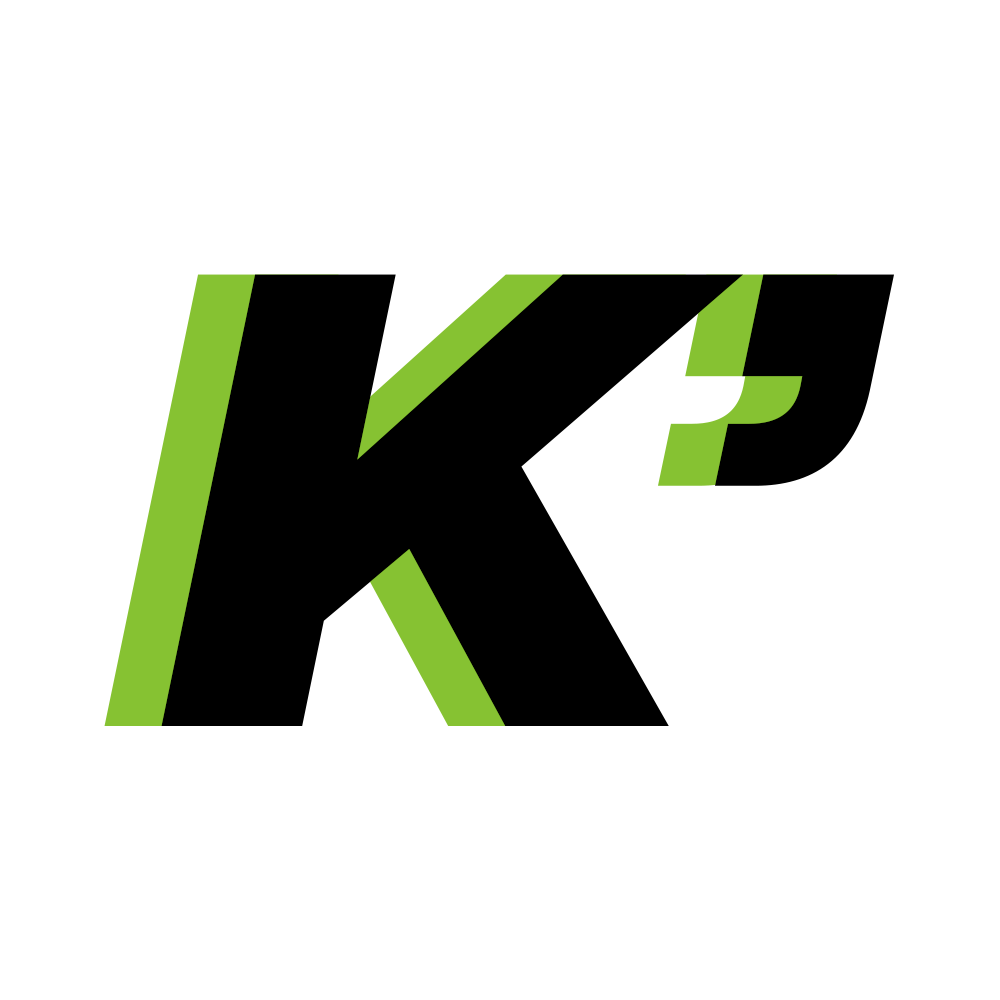
<style>
.page{position:relative;width:1000px;height:1000px;background:#ffffff}
.page>*{position:absolute;margin:0}
.t1{font:619.2px "Mona-Sans-BlackWideItalic"}
.t2{font:619.2px "Mona-Sans-BlackWideItalic";color:#000000}
</style>
<div class="page">
<p class="t1" style="left:104px;top:274px;width:733px;height:452px">K’</p>
<p class="t2" style="left:161px;top:274px;width:733px;height:452px">K’</p>
</div>
